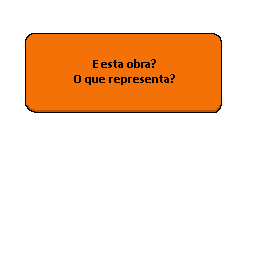
<style>
.page{position:relative;width:256px;height:256px;background:#ffffff}
.page>*{position:absolute;margin:0}
.t1{font:12.5px "Calibri-Bold";color:#000000}
</style>
<div class="page">
<p class="t1" style="left:74px;top:59px;width:101px;height:26px;text-align:center">E esta obra?<br>O que representa?</p>
</div>
